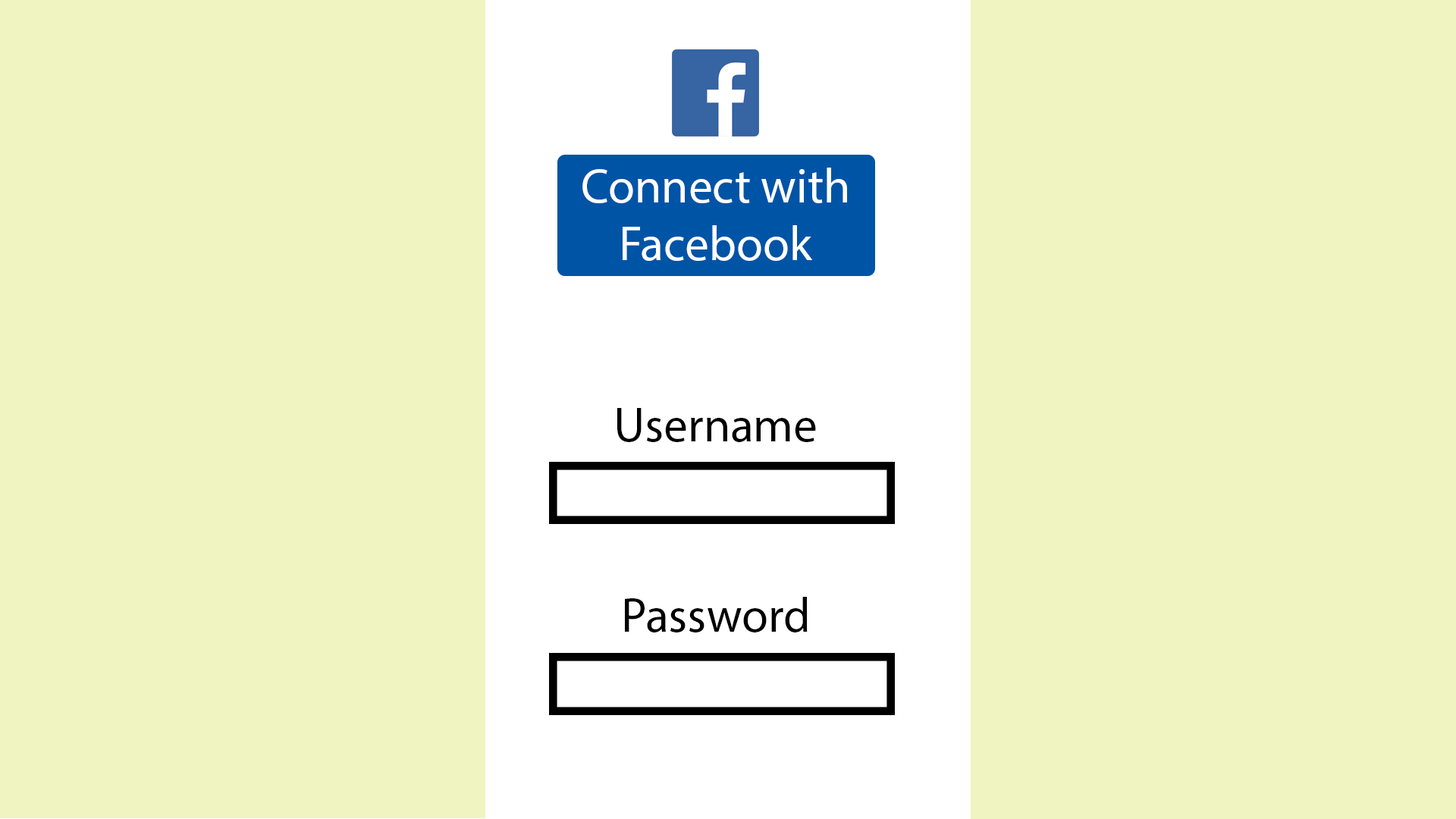
<style>
.page{position:relative;width:1456px;height:819px;background:#f0f4c1}
.page>*{position:absolute;margin:0}
.t1{font:48.2px "MyriadPro-Regular";color:#ffffff}
.t2{font:48.2px "MyriadPro-Regular";color:#000000}
</style>
<div class="page">
<p class="t1" style="left:582px;top:168px;width:265px;height:93px;text-align:center">Connect with Facebook</p>
<p class="t2" style="left:617px;top:408px;width:199px;height:34px">Username</p>
<p class="t2" style="left:625px;top:597px;width:183px;height:35px">Password</p>
</div>
